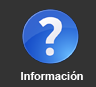
<style>
.page{position:relative;width:96px;height:87px;background:#333333}
.page>*{position:absolute;margin:0}
.t1{font:11px "Arial-BoldMT";color:#ffffff}
.t2{font:11px "Arial-BoldItalicMT";color:#ffffff}
</style>
<div class="page">
<p class="t1" style="left:21px;top:71px;width:62px;height:9px"><span class="t2">                     </span>Información</p>
</div>
